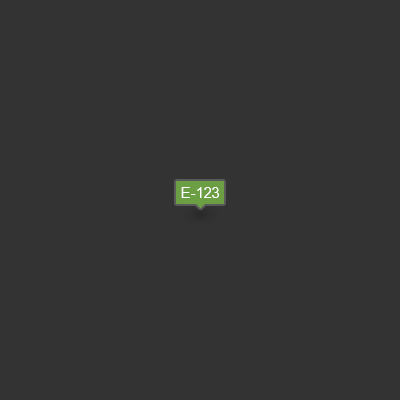
<style>
.page{position:relative;width:400px;height:400px;background:#333333}
.page>*{position:absolute;margin:0}
.t1{font:15px "ArialMT";color:#ffffff}
</style>
<div class="page">
<p class="t1" style="left:181px;top:187px;width:38px;height:11px">E-123</p>
</div>
